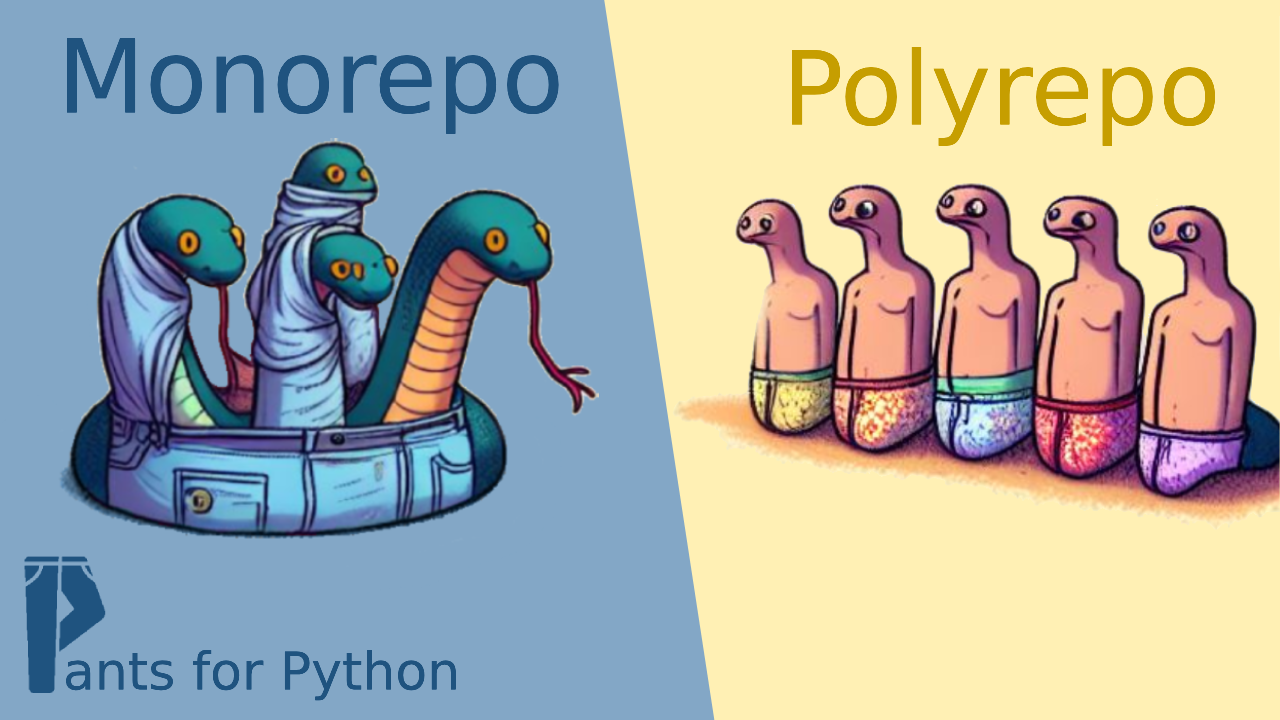
<style>
.page{position:relative;width:1280px;height:720px;background:#83a7c6}
.page>*{position:absolute;margin:0}
.t1{font:102px "DejaVuSans";color:#1f537f}
.t2{font:102px "DejaVuSans";color:#af8d04}
.t3{font:52px "DejaVuSans";color:#1f537f}
</style>
<div class="page">
<p class="t1" style="left:67px;top:38px;width:492px;height:96px">Monorepo</p>
<p class="t2" style="left:792px;top:47px;width:424px;height:99px">Polyrepo</p>
<p class="t3" style="left:66px;top:650px;width:390px;height:51px">ants for Python</p>
</div>
